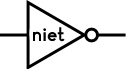
<style>
.page{position:relative;width:126px;height:69px;background:#ffffff}
.page>*{position:absolute;margin:0}
.t1{font:18.4px "LeonSans-Bold";color:#000000}
</style>
<div class="page">
<p class="t1" style="left:33px;top:27px;width:32px;height:15px">niet</p>
</div>
